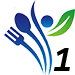
<style>
.page{position:relative;width:75px;height:75px;background:#ffffff}
.page>*{position:absolute;margin:0}
.t1{font:36px "Consolas-BoldItalic";color:#000000}
</style>
<div class="page">
<p class="t1" style="left:53px;top:48px;width:17px;height:23px">1</p>
</div>
